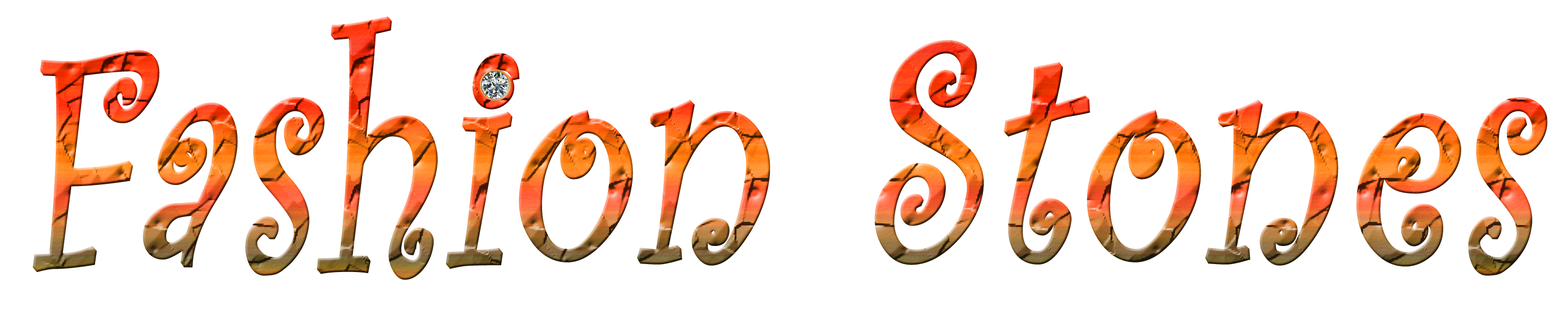
<style>
.page{position:relative;width:1568px;height:314px;background:#ffffff}
.page>*{position:absolute;margin:0}
.t1{font:315.4px "CurlzMT";font-weight:bold;font-style:italic;scale:0.81 1}
</style>
<div class="page">
<p class="t1" style="left:32px;top:16px;width:1516px;height:264px">Fashion Stones</p>
</div>
